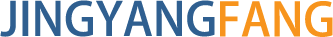
<style>
.page{position:relative;width:333px;height:37px;background:#ffffff}
.page>*{position:absolute;margin:0}
.t1{font:45.8px "AdobeHeitiStd-Regular";color:#2f5f90}
.t2{font:45.8px "AdobeHeitiStd-Regular";color:#f7941d}
</style>
<div class="page">
<p class="t1" style="left:0px;top:0px;width:215px;height:37px">JINGYANG</p>
<p class="t2" style="left:220px;top:1px;width:113px;height:36px">FANG</p>
</div>
